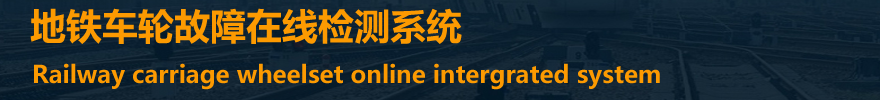
<style>
.page{position:relative;width:880px;height:100px}
.page>*{position:absolute;margin:0}
.t1{font:36px "MicrosoftYaHei-Bold";color:#fc9a01}
.t2{font:24px "MicrosoftYaHei-Bold";color:#fc9a01}
</style>
<div class="page">
<p class="t1" style="left:30px;top:8px;width:432px;height:36px">地铁车轮故障在线检测系统</p>
<p class="t2" style="left:34px;top:63px;width:626px;height:27px">Railway carriage wheelset online intergrated system</p>
</div>
